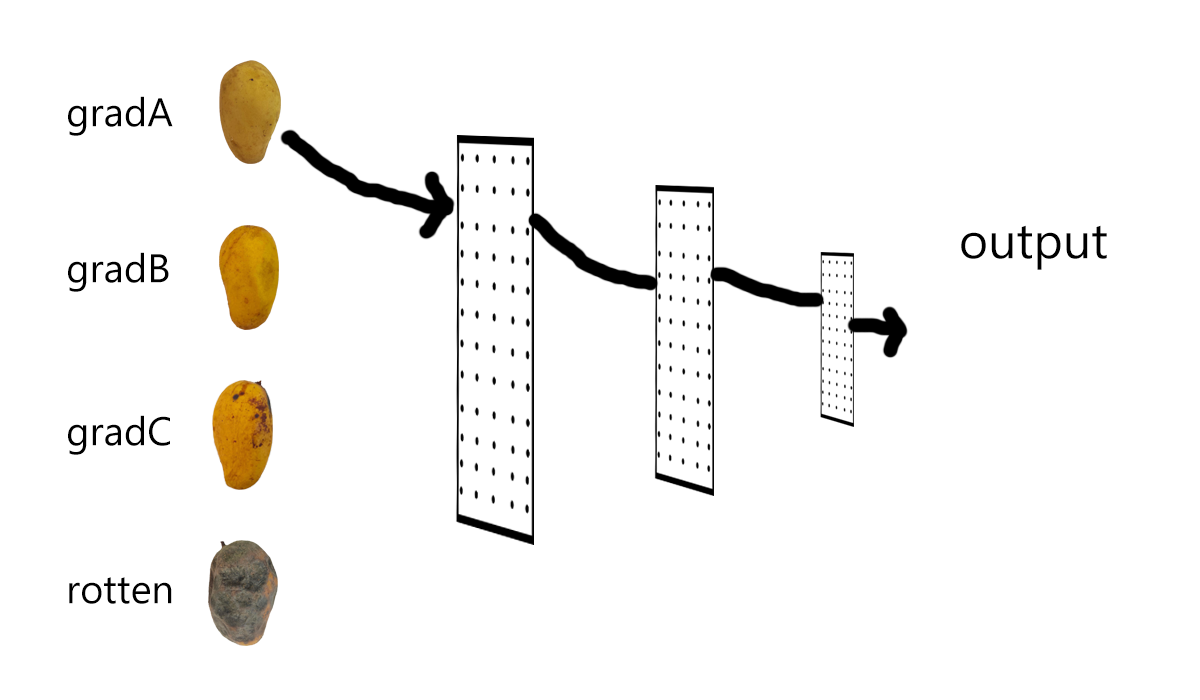
<style>
.page{position:relative;width:1200px;height:700px;background:#ffffff}
.page>*{position:absolute;margin:0}
.t1{font:40px "MicrosoftTaiLe";color:#000000}
.t2{font:50px "MicrosoftTaiLe";color:#000000}
</style>
<div class="page">
<p class="t1" style="left:68px;top:96px;width:105px;height:40px">gradA</p>
<p class="t2" style="left:961px;top:225px;width:146px;height:45px">output</p>
<p class="t1" style="left:68px;top:252px;width:101px;height:40px">gradB</p>
<p class="t1" style="left:68px;top:415px;width:102px;height:40px">gradC</p>
<p class="t1" style="left:69px;top:577px;width:103px;height:27px">rotten</p>
</div>
